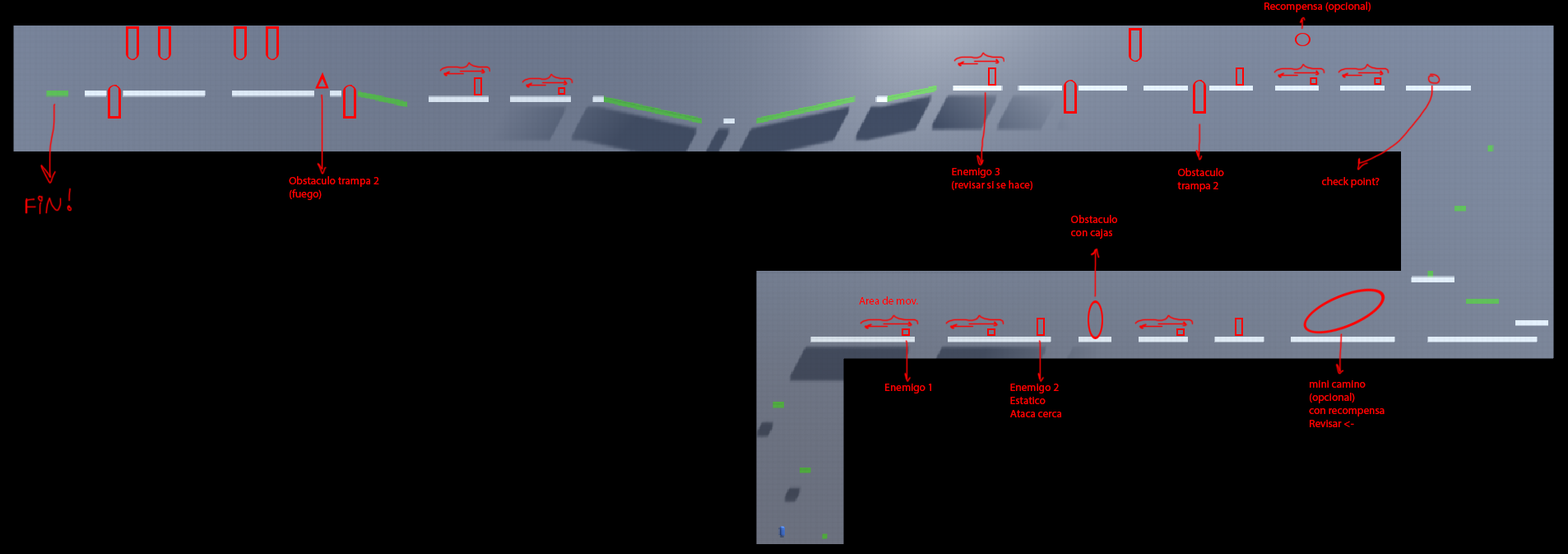
<style>
.page{position:relative;width:1568px;height:554px;background:#000000}
.page>*{position:absolute;margin:0}
.t1{font:11px "MyriadPro-Regular";color:#ff0000}
</style>
<div class="page">
<p class="t1" style="left:1264px;top:2px;width:107px;height:10px">Recompensa (opcional)</p>
<p class="t1" style="left:952px;top:168px;width:80px;height:22px">Enemigo 3<br>(revisar si se hace)</p>
<p class="t1" style="left:1177px;top:168px;width:47px;height:24px">Obstaculo trampa 2</p>
<p class="t1" style="left:289px;top:176px;width:90px;height:24px">Obstaculo trampa 2<br>(fuego)</p>
<p class="t1" style="left:1322px;top:177px;width:58px;height:11px">check point?</p>
<p class="t1" style="left:1071px;top:215px;width:46px;height:24px">Obstaculo <br>con cajas</p>
<p class="t1" style="left:859px;top:296px;width:59px;height:8px">Area de mov.</p>
<p class="t1" style="left:885px;top:383px;width:46px;height:10px">Enemigo 1</p>
<p class="t1" style="left:1010px;top:383px;width:51px;height:34px">Enemigo 2<br>Estatico<br>Ataca cerca</p>
<p class="t1" style="left:1309px;top:380px;width:76px;height:47px">mini camino <br>(opcional)<br>con recompensa<br>Revisar &lt;-</p>
</div>
